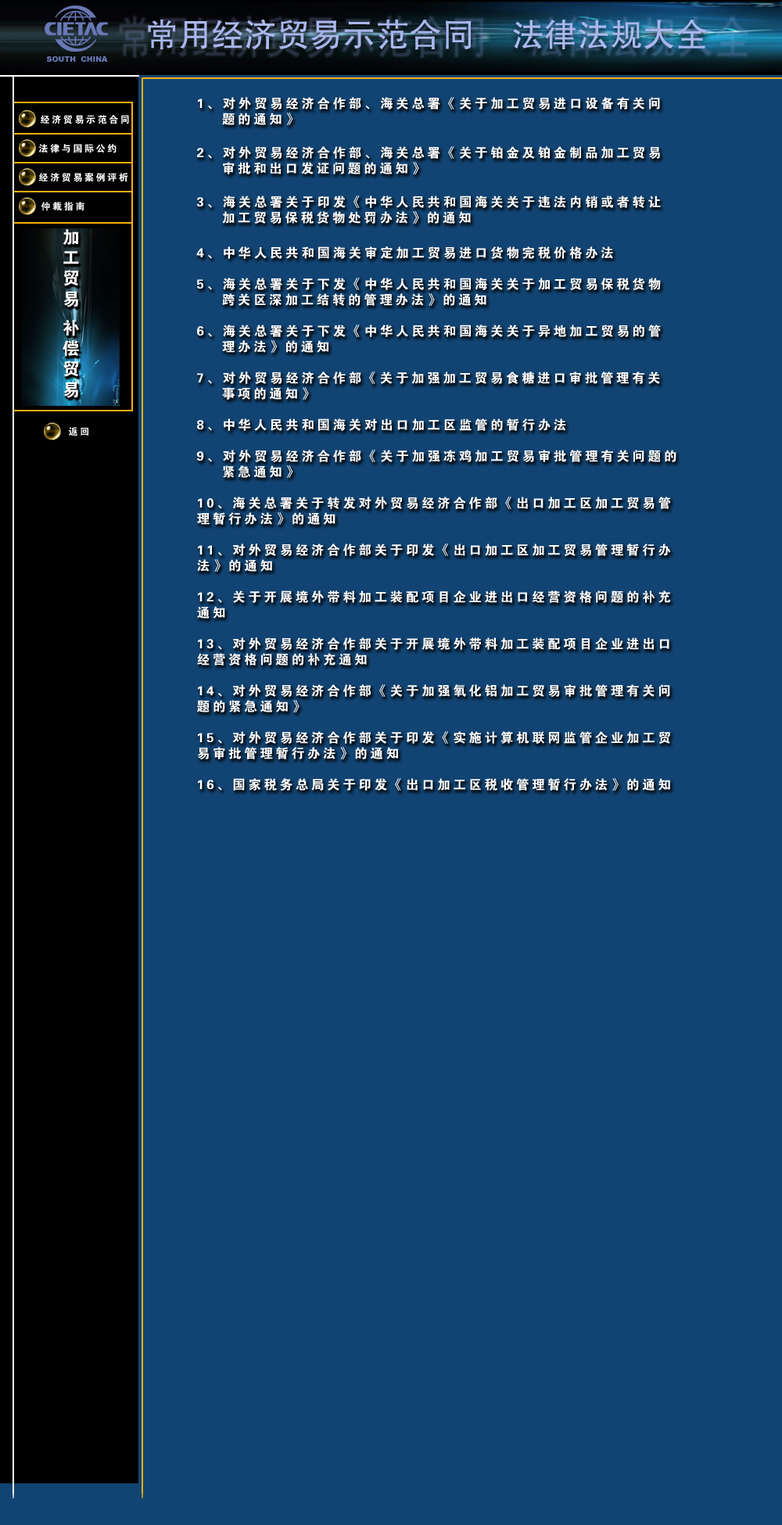
<style>
.page{position:relative;width:782px;height:1525px;background:#114473}
.page>*{position:absolute;margin:0}
.t1{font:13.1px/15.6px "FZDHTJW--GB1-0";letter-spacing:0.2em;color:#ffffff}
.t2{font:9.5px "FZDHTJW--GB1-0";letter-spacing:0.2em;color:#ffffff}
.t3{font:17.2px/16.5px "FZDHTJW--GB1-0";letter-spacing:0.2em;color:#ffffff}
</style>
<div class="page">
<p class="t1" style="left:198px;top:97px;width:462px;height:28px">1、对外贸易经济合作部、海关总署《关于加工贸易进口设备有关问<br>    题的通知》</p>
<p class="t2" style="left:41px;top:115px;width:88px;height:9px">经济贸易示范合同</p>
<p class="t2" style="left:38px;top:144px;width:79px;height:9px">法律与国际公约</p>
<p class="t1" style="left:197px;top:146px;width:463px;height:28px">2、对外贸易经济合作部、海关总署《关于铂金及铂金制品加工贸易<br>    审批和出口发证问题的通知》</p>
<p class="t2" style="left:39px;top:173px;width:89px;height:9px">经济贸易案例评析</p>
<p class="t1" style="left:197px;top:195px;width:464px;height:29px">3、海关总署关于印发《中华人民共和国海关关于违法内销或者转让<br>    加工贸易保税货物处罚办法》的通知</p>
<p class="t2" style="left:41px;top:202px;width:43px;height:9px">仲裁指南</p>
<p class="t3" style="left:63px;top:229px;width:16px;height:169px">加工贸易 补偿贸易</p>
<p class="t1" style="left:196px;top:246px;width:480px;height:545px">4、中华人民共和国海关审定加工贸易进口货物完税价格办法<br><br>5、海关总署关于下发《中华人民共和国海关关于加工贸易保税货物<br>    跨关区深加工结转的管理办法》的通知<br><br>6、海关总署关于下发《中华人民共和国海关关于异地加工贸易的管<br>    理办法》的通知<br><br>7、对外贸易经济合作部 《关于加强加工贸易食糖进口审批管理有关<br>    事项的通知》<br><br>8、中华人民共和国海关对出口加工区监管的暂行办法<br><br>9、对外贸易经济合作部《关于加强冻鸡加工贸易审批管理有关问题的<br>    紧急通知》<br><br>10、海关总署关于转发对外贸易经济合作部《出口加工区加工贸易管<br>理暂行办法》的通知<br><br>11、对外贸易经济合作部关于印发《出口加工区加工贸易管理暂行办<br>法》的通知<br><br>12、关于开展境外带料加工装配项目企业进出口经营资格问题的补充<br>通知<br><br>13、对外贸易经济合作部关于开展境外带料加工装配项目企业进出口<br>经营资格问题的补充通知<br><br>14、对外贸易经济合作部《关于加强氧化铝加工贸易审批管理有关问<br>题的紧急通知》<br><br>15、对外贸易经济合作部关于印发《实施计算机联网监管企业加工贸<br>易审批管理暂行办法》的通知<br><br>16、国家税务总局关于印发《出口加工区税收管理暂行办法》的通知</p>
</div>
